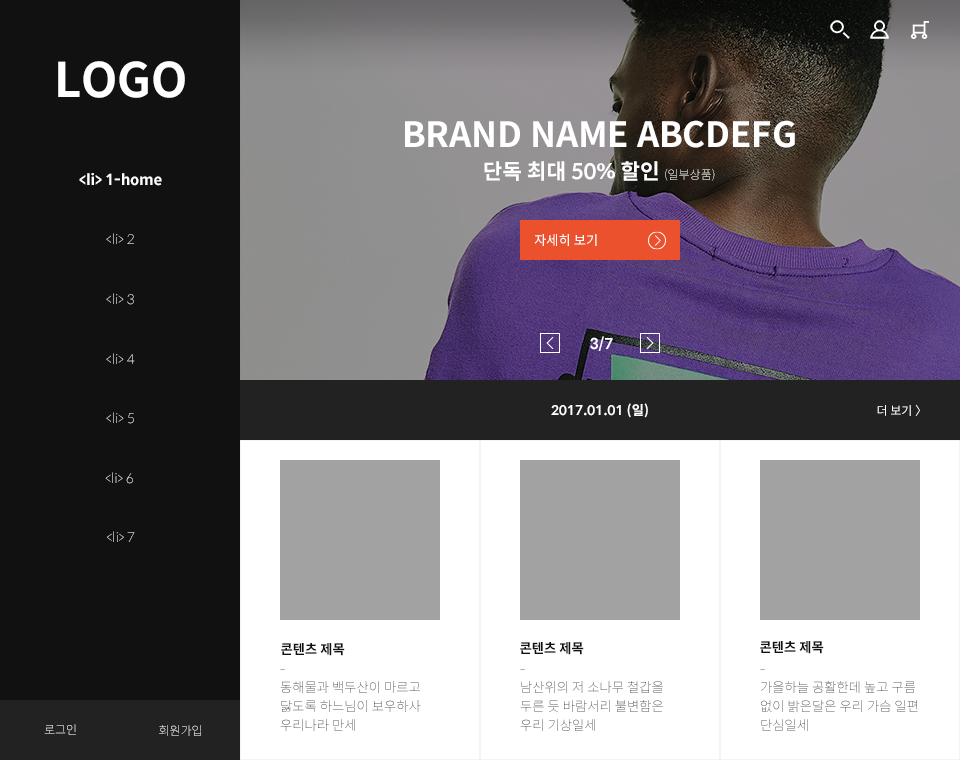
<style>
.page{position:relative;width:960px;height:760px;background:#111111}
.page>*{position:absolute;margin:0}
.t1{font:47.4px "SpoqaHanSans-Bold";color:#ffffff}
.t2{font:34.7px/32px "SpoqaHanSans-Bold";color:#ffffff}
.t3{font:21.3px/32px "SpoqaHanSans-Bold";color:#ffffff}
.t4{font:12px/32px "SpoqaHanSans-Thin";color:#ffffff}
.t5{font:14.7px "SpoqaHanSans-Bold";color:#ffffff}
.t6{font:13.3px "SpoqaHanSans-Thin"}
.t7{font:13.3px "SpoqaHanSans-Regular";color:#ffffff}
.t8{font:13.3px "SpoqaHanSans-Bold";color:#ffffff}
.t9{font:12px "SpoqaHanSans-Regular";color:#ffffff}
.t10{font:13.3px "SpoqaHanSans-Bold";color:#111111}
.t11{font:13.3px/18.7px "SpoqaHanSans-Thin"}
.t12{font:12px "SpoqaHanSans-Thin"}
</style>
<div class="page">
<p class="t1" style="left:58px;top:61px;width:127px;height:37px">LOGO</p>
<p class="t2" style="left:405px;top:120px;width:390px;height:61px;text-align:center">BRAND NAME ABCDEFG<br><span class="t3">단독 최대 50% 할인 </span><span class="t4">(일부상품)</span></p>
<p class="t5" style="left:79px;top:173px;width:83px;height:13px">&lt;li&gt; 1-home</p>
<p class="t6" style="left:106px;top:233px;width:28px;height:11px">&lt;li&gt; 2</p>
<p class="t7" style="left:534px;top:234px;width:63px;height:12px">자세히 보기</p>
<p class="t6" style="left:106px;top:293px;width:28px;height:12px">&lt;li&gt; 3</p>
<p class="t5" style="left:590px;top:336px;width:23px;height:15px">3/7</p>
<p class="t6" style="left:106px;top:353px;width:29px;height:11px">&lt;li&gt; 4</p>
<p class="t6" style="left:106px;top:412px;width:28px;height:12px">&lt;li&gt; 5</p>
<p class="t8" style="left:551px;top:403px;width:97px;height:15px">2017.01.01 (일)</p>
<p class="t9" style="left:877px;top:404px;width:43px;height:12px">더 보기 〉</p>
<p class="t6" style="left:105px;top:472px;width:28px;height:12px">&lt;li&gt; 6</p>
<p class="t6" style="left:107px;top:531px;width:28px;height:11px">&lt;li&gt; 7</p>
<p class="t10" style="left:760px;top:641px;width:64px;height:13px">콘텐츠 제목</p>
<p class="t10" style="left:281px;top:643px;width:64px;height:13px">콘텐츠 제목</p>
<p class="t10" style="left:520px;top:642px;width:64px;height:13px">콘텐츠 제목</p>
<p class="t11" style="left:280px;top:669px;width:141px;height:62px">-<br>동해물과 백두산이 마르고 닳도록 하느님이 보우하사 우리나라 만세</p>
<p class="t11" style="left:520px;top:669px;width:143px;height:62px">-<br>남산위의 저 소나무 철갑을 두른 듯 바람서리 불변함은 우리 기상일세</p>
<p class="t11" style="left:760px;top:669px;width:158px;height:62px">-<br>가을하늘 공활한데 높고 구름 없이 밝은달은 우리 가슴 일편 단심일세</p>
<p class="t12" style="left:44px;top:724px;width:32px;height:11px">로그인</p>
<p class="t12" style="left:159px;top:725px;width:42px;height:11px">회원가입</p>
</div>
